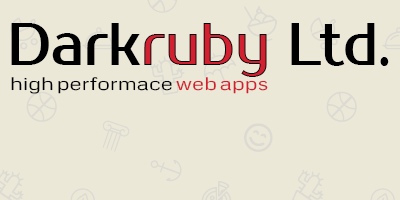
<style>
.page{position:relative;width:400px;height:200px;background:#ebe8d7}
.page>*{position:absolute;margin:0}
.t1{font:60px "ProstoOne-Regular";color:#000000;scale:0.85 1}
.t2{font:60px "ProstoOne-Regular";color:#d32031;scale:0.85 1}
.t3{font:18px "Metrophobic";letter-spacing:0.005em;color:#000000;scale:1.25 1}
.t4{font:18px "Metrophobic";letter-spacing:0.005em;color:#d32031;scale:1.25 1}
</style>
<div class="page">
<p class="t1" style="left:11px;top:23px;width:378px;height:54px">Dark<span class="t2">ruby</span> Ltd.</p>
<p class="t3" style="left:11px;top:77px;width:257px;height:17px">high performace <span class="t4">web apps</span></p>
</div>
